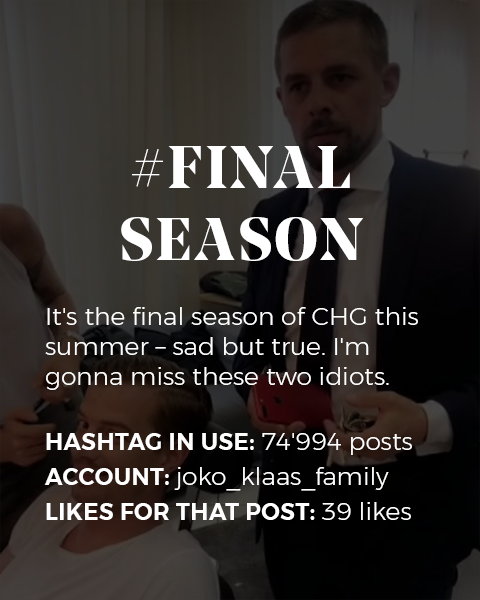
<style>
.page{position:relative;width:480px;height:600px}
.page>*{position:absolute;margin:0}
.t1{font:25px "Montserrat-Light";color:#ffffff}
.t2{font:60px "NoeDisplay-Bold";letter-spacing:0.05em;color:#ffffff;text-transform:uppercase}
.t3{font:23px/35px "Montserrat-SemiBold";letter-spacing:0.02em;color:#ffffff;text-transform:uppercase}
.t4{font:25px/35px "Montserrat-Light";color:#ffffff}
</style>
<div class="page">
<p class="t1" style="left:44px;top:146px;width:374px;height:374px;text-align:center"><span class="t2">#final<br>season<br><br></span>It's the final season of CHG this summer – sad but true. I'm gonna miss these two idiots.<br><br><span class="t3">Hashtag in use:</span><span class="t4"> 74'994 posts<br></span><span class="t3">Account: </span><span class="t4">joko_klaas_family<br></span><span class="t3">Likes for that post: </span><span class="t4">39 likes</span></p>
</div>
